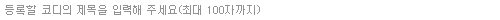
<style>
.page{position:relative;width:500px;height:20px;background:#ffffff}
.page>*{position:absolute;margin:0}
.t1{font:12px "morris9";color:#929292;scale:0.96 1}
</style>
<div class="page">
<p class="t1" style="left:5px;top:5px;width:255px;height:10px">등록할 코디의 제목을 입력해 주세요(최대 100자까지)</p>
</div>
